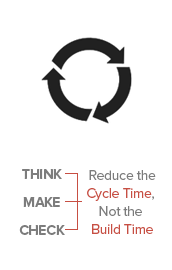
<style>
.page{position:relative;width:172px;height:270px;background:#ffffff}
.page>*{position:absolute;margin:0}
.t1{font:14.4px/14px "ProximaNova-Bold";letter-spacing:-0.02em;color:#7c7c7c}
.t2{font:14.4px/18px "ProximaNova-Regular";letter-spacing:-0.02em;color:#7c7c7c}
.t3{font:14.4px/18px "ProximaNova-Regular";letter-spacing:-0.02em;color:#c74f43}
</style>
<div class="page">
<p class="t1" style="left:19px;top:169px;width:46px;height:66px;text-align:center">THINK<br><br>MAKE<br><br>CHECK</p>
<p class="t2" style="left:87px;top:170px;width:69px;height:64px;text-align:center">Reduce the<br><span class="t3">Cycle Time</span>, <br>Not the <br><span class="t3">Build Time</span></p>
</div>
